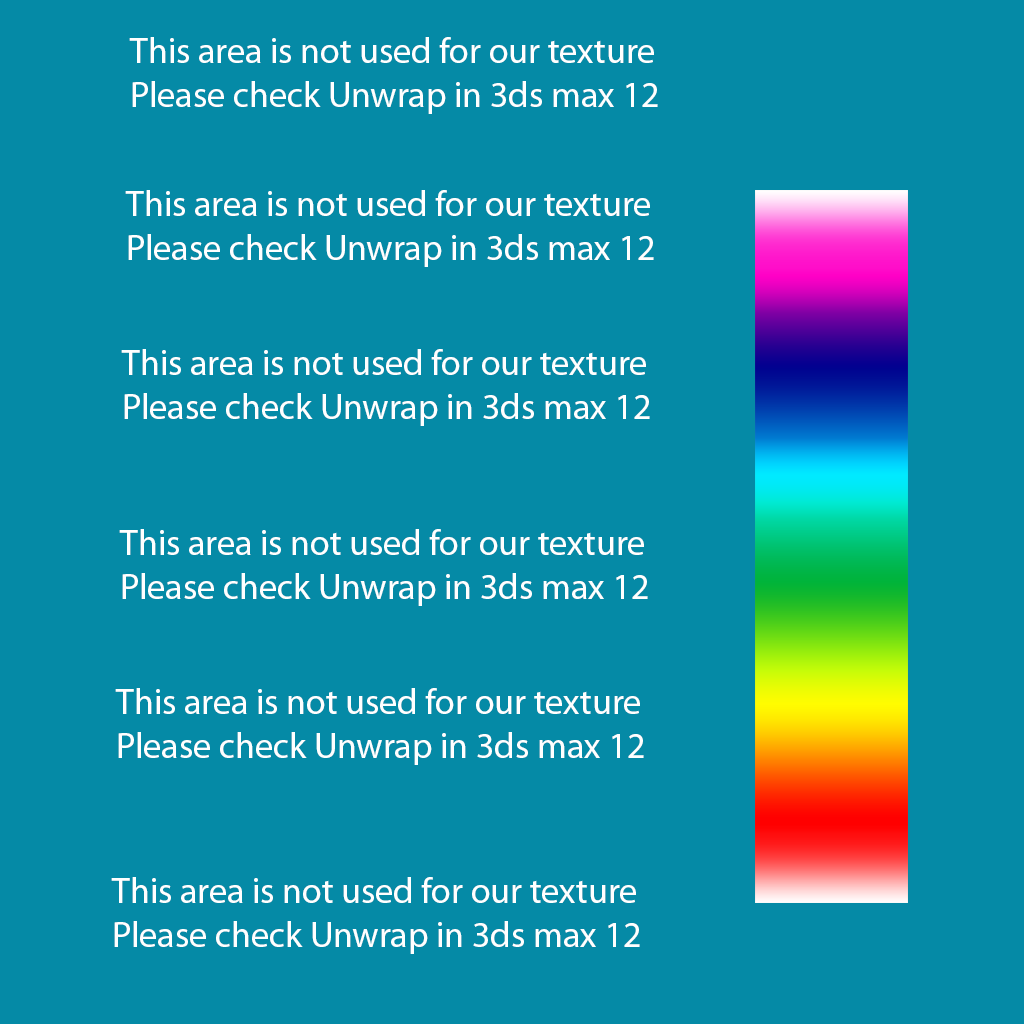
<style>
.page{position:relative;width:1024px;height:1024px;background:#058aa6}
.page>*{position:absolute;margin:0}
.t1{font:36px "MyriadPro-Regular";color:#ffffff}
</style>
<div class="page">
<p class="t1" style="left:129px;top:37px;width:529px;height:77px">This area is not used for our texture<br>Please check Unwrap in 3ds max 12</p>
<p class="t1" style="left:125px;top:190px;width:529px;height:77px">This area is not used for our texture<br>Please check Unwrap in 3ds max 12</p>
<p class="t1" style="left:121px;top:349px;width:529px;height:77px">This area is not used for our texture<br>Please check Unwrap in 3ds max 12</p>
<p class="t1" style="left:119px;top:529px;width:529px;height:77px">This area is not used for our texture<br>Please check Unwrap in 3ds max 12</p>
<p class="t1" style="left:115px;top:688px;width:529px;height:77px">This area is not used for our texture<br>Please check Unwrap in 3ds max 12</p>
<p class="t1" style="left:111px;top:877px;width:529px;height:77px">This area is not used for our texture<br>Please check Unwrap in 3ds max 12</p>
</div>
